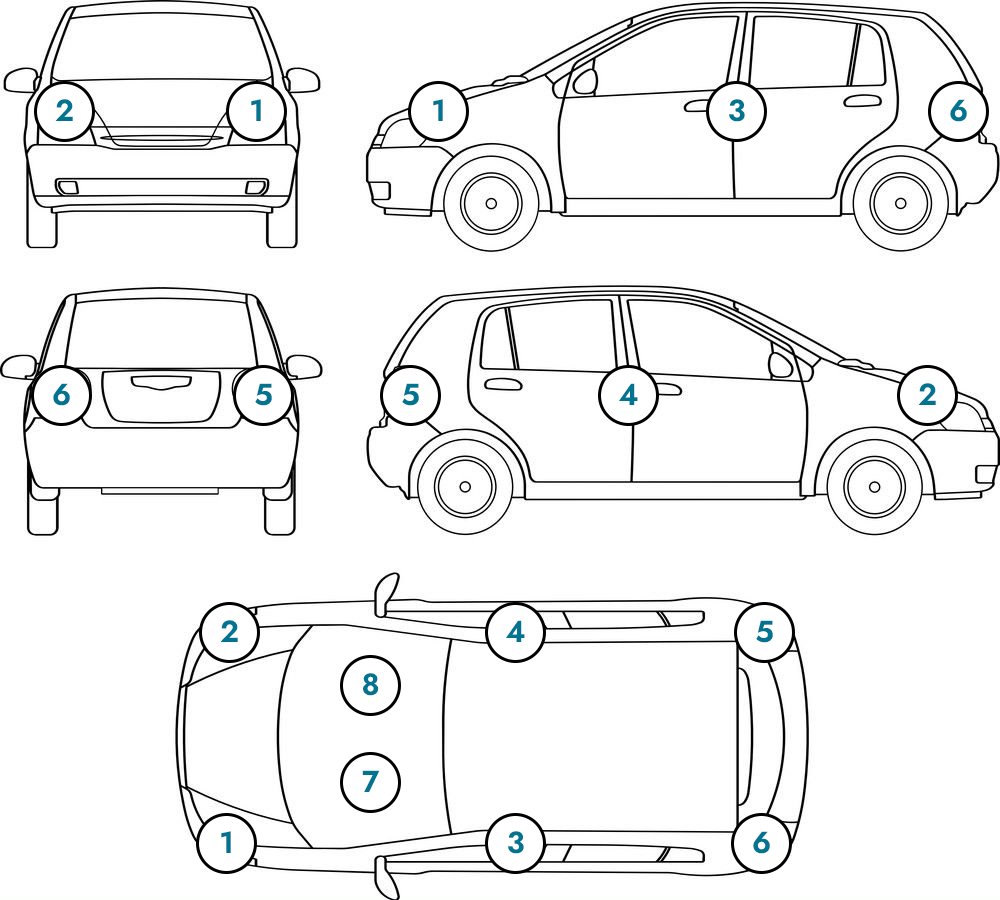
<style>
.page{position:relative;width:1000px;height:900px;background:#ffffff}
.page>*{position:absolute;margin:0}
.t1{font:30px "Jost-SemiBold";color:#007490}
</style>
<div class="page">
<p class="t1" style="left:55px;top:99px;width:18px;height:22px">2</p>
<p class="t1" style="left:251px;top:99px;width:10px;height:22px">1</p>
<p class="t1" style="left:433px;top:99px;width:10px;height:22px">1</p>
<p class="t1" style="left:729px;top:99px;width:16px;height:23px">3</p>
<p class="t1" style="left:950px;top:99px;width:17px;height:23px">6</p>
<p class="t1" style="left:53px;top:383px;width:17px;height:23px">6</p>
<p class="t1" style="left:255px;top:383px;width:17px;height:23px">5</p>
<p class="t1" style="left:402px;top:383px;width:17px;height:23px">5</p>
<p class="t1" style="left:619px;top:383px;width:19px;height:22px">4</p>
<p class="t1" style="left:918px;top:383px;width:18px;height:22px">2</p>
<p class="t1" style="left:220px;top:620px;width:18px;height:22px">2</p>
<p class="t1" style="left:506px;top:620px;width:19px;height:22px">4</p>
<p class="t1" style="left:756px;top:620px;width:17px;height:23px">5</p>
<p class="t1" style="left:363px;top:673px;width:16px;height:23px">8</p>
<p class="t1" style="left:362px;top:770px;width:18px;height:22px">7</p>
<p class="t1" style="left:221px;top:831px;width:10px;height:22px">1</p>
<p class="t1" style="left:508px;top:831px;width:16px;height:23px">3</p>
<p class="t1" style="left:753px;top:831px;width:17px;height:23px">6</p>
</div>
